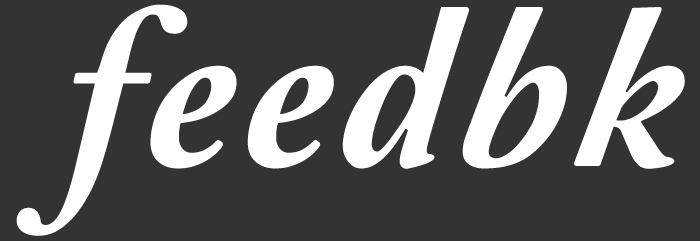
<style>
.page{position:relative;width:700px;height:241px;background:#333333}
.page>*{position:absolute;margin:0}
.t1{font:234.4px "Amperzand";letter-spacing:0.025em;color:#ffffff}
</style>
<div class="page">
<p class="t1" style="left:16px;top:4px;width:669px;height:232px">feedbk</p>
</div>
